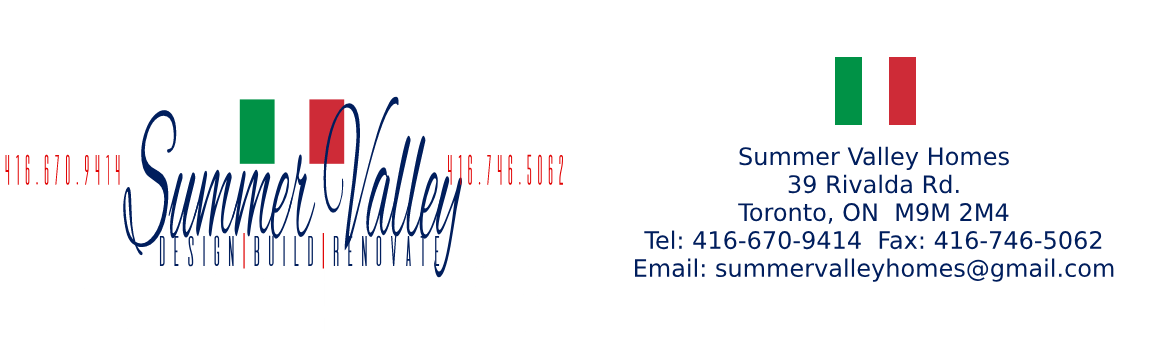
<style>
.page{position:relative;width:1156px;height:338px;background:#ffffff}
.page>*{position:absolute;margin:0}
.t1{font:201.5px "AlexBrush-Regular";color:#001e5d;scale:0.3 1}
.t2{font:24px "DejaVuSans";color:#001e5d}
.t3{font:37px "DeValencia-Regular";letter-spacing:-0.03em;color:#e20404;scale:0.52 1}
.t4{font:37.5px "DeValencia-Regular";color:#001e5d;scale:0.66 1}
.t5{font:37.5px "DeValencia-Regular";color:#e20404;scale:0.66 1}
</style>
<div class="page">
<p class="t1" style="left:123px;top:96px;width:339px;height:182px">Summer Valley</p>
<p class="t2" style="left:635px;top:146px;width:479px;height:136px;text-align:center">Summer Valley Homes<br>39 Rivalda Rd.<br>Toronto, ON  M9M 2M4<br>Tel: 416-670-9414  Fax: 416-746-5062<br>Email: summervalleyhomes@gmail.com</p>
<p class="t3" style="left:5px;top:154px;width:115px;height:31px">416.670.9414</p>
<p class="t3" style="left:448px;top:154px;width:115px;height:31px">416.746.5062</p>
<p class="t4" style="left:159px;top:233px;width:281px;height:36px">Design<span class="t5">|</span>Build<span class="t5">|</span>Renovate</p>
</div>
